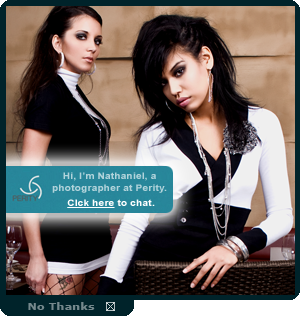
<style>
.page{position:relative;width:300px;height:316px}
.page>*{position:absolute;margin:0}
.t1{font:9px "Arial-BoldMT";letter-spacing:0.025em;color:#b1d3db;scale:1.11 1}
.t2{font:9px "Arial-BoldMT";letter-spacing:0.025em;color:#ffffff;text-decoration:underline;scale:1.11 1}
.t3{font:9px "Arial-BoldMT";letter-spacing:0.025em;color:#ffffff;scale:1.11 1}
.t4{font:9.9px "Verdana-Bold";letter-spacing:0.025em;color:#75888c;scale:1.11 1}
</style>
<div class="page">
<p class="t1" style="left:52px;top:172px;width:115px;height:21px;text-align:center">Hi, I’m Nathaniel, a photographer at Perity.</p>
<p class="t2" style="left:67px;top:199px;width:88px;height:9px">Clck here<span class="t3"> to chat.</span></p>
<p class="t4" style="left:28px;top:302px;width:67px;height:8px">No Thanks</p>
</div>
